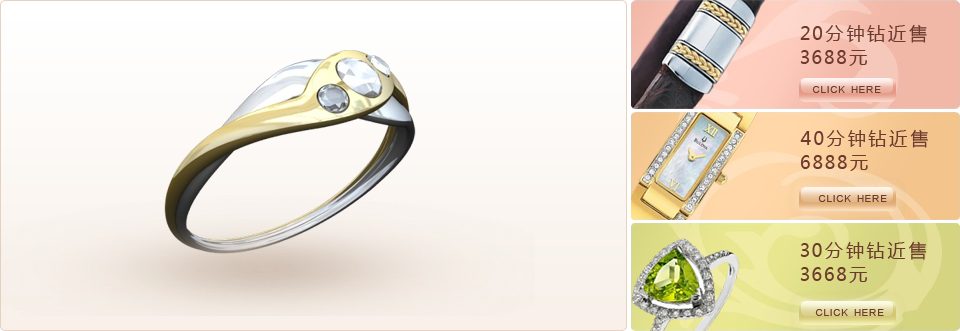
<style>
.page{position:relative;width:960px;height:331px}
.page>*{position:absolute;margin:0}
.t1{font:18px/24px "MicrosoftYaHei";letter-spacing:0.2em;color:#6c3b2e;text-transform:uppercase}
.t2{font:10px "ArialMT";letter-spacing:0.2em;color:#6c3b2e;text-transform:uppercase}
</style>
<div class="page">
<p class="t1" style="left:800px;top:24px;width:127px;height:42px">20分钟钻近售<br>3688元</p>
<p class="t2" style="left:812px;top:86px;width:69px;height:7px">click here</p>
<p class="t1" style="left:800px;top:129px;width:128px;height:42px">40分钟钻近售<br>6888元</p>
<p class="t2" style="left:818px;top:195px;width:69px;height:7px">click here</p>
<p class="t1" style="left:800px;top:241px;width:126px;height:42px">30分钟钻近售<br>3668元</p>
<p class="t2" style="left:815px;top:309px;width:69px;height:7px">click here</p>
</div>
